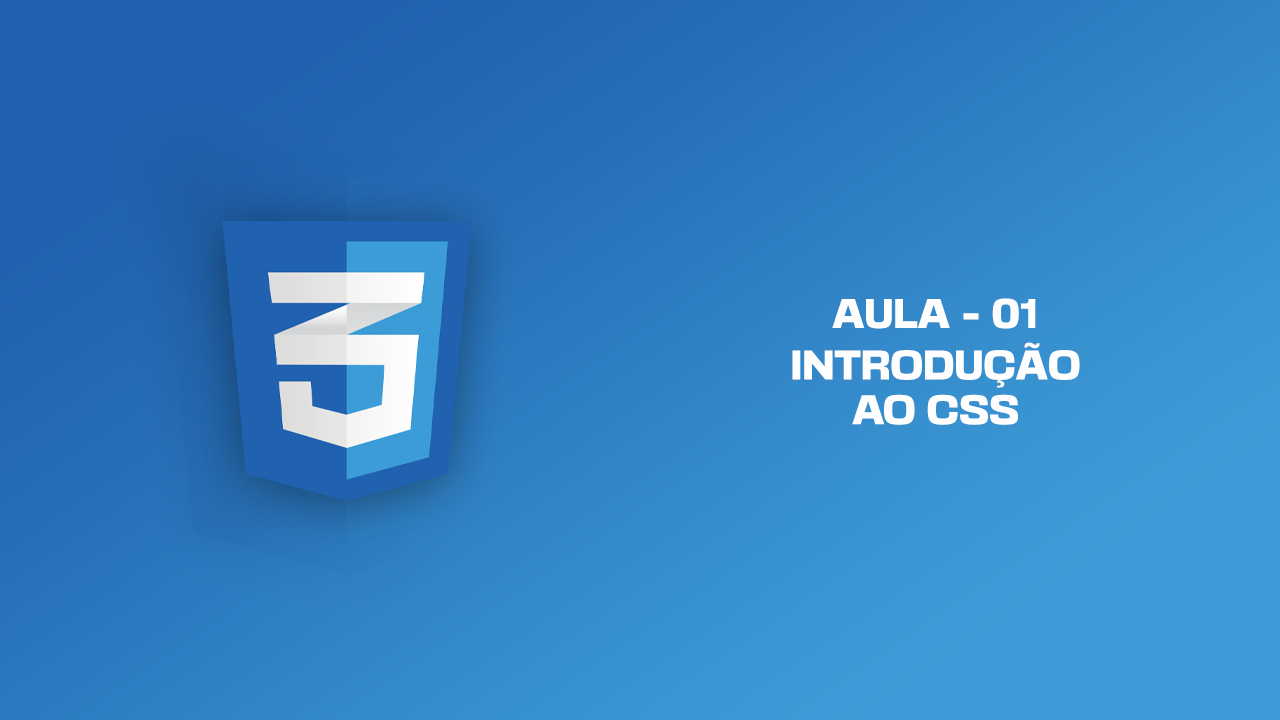
<style>
.page{position:relative;width:1280px;height:720px}
.page>*{position:absolute;margin:0}
.t1{font:37.2px "BasementGrotesque-Black";color:#fefefe;text-transform:uppercase}
</style>
<div class="page">
<p class="t1" style="left:832px;top:298px;width:204px;height:31px">aula - 01</p>
<p class="t1" style="left:792px;top:342px;width:288px;height:83px;text-align:center">Introdução<br>ao css</p>
</div>
